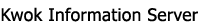
<style>
.page{position:relative;width:200px;height:27px;background:#ffffff}
.page>*{position:absolute;margin:0}
.t1{font:17.3px "Tahoma";letter-spacing:0.02em;color:#000000}
</style>
<div class="page">
<p class="t1" style="left:1px;top:7px;width:197px;height:15px">Kwok Information Server</p>
</div>
